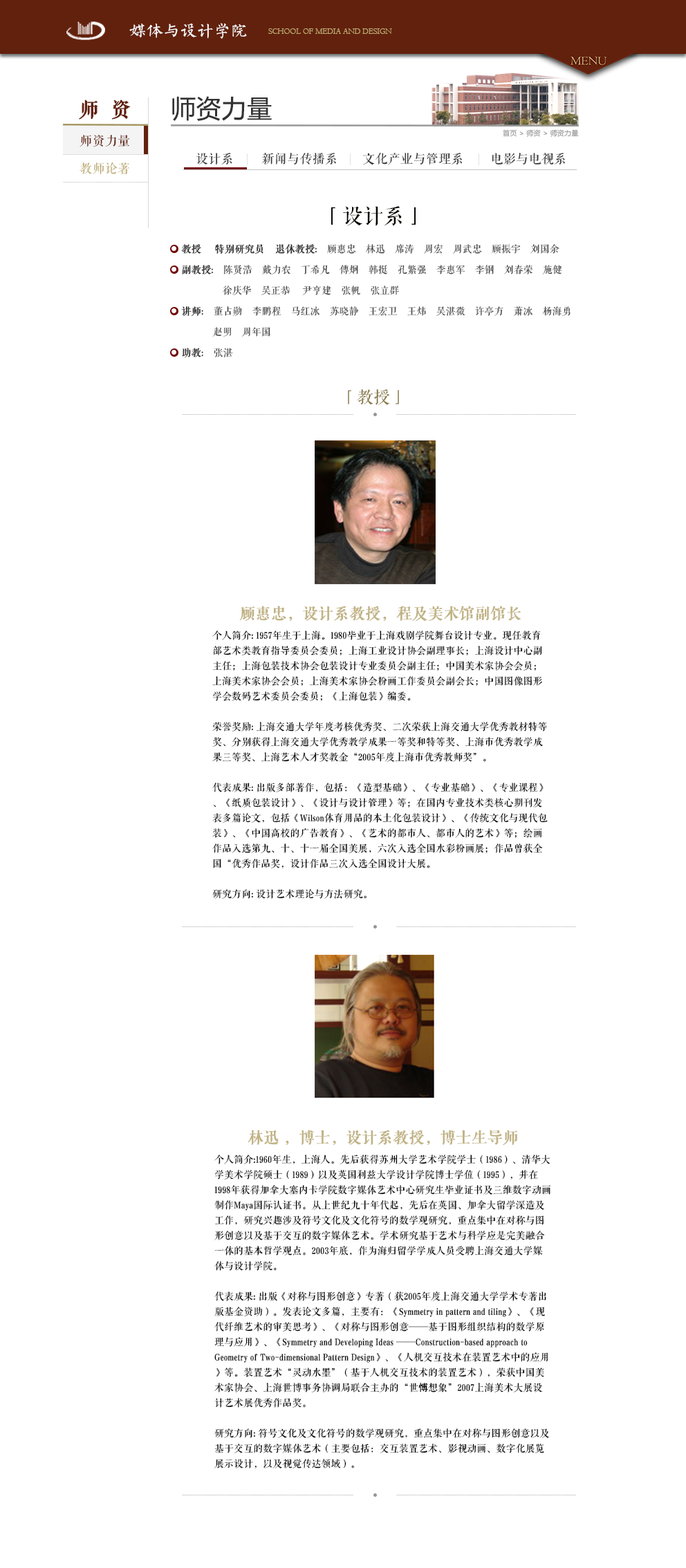
<style>
.page{position:relative;width:686px;height:1568px;background:#ffffff}
.page>*{position:absolute;margin:0}
.t1{font:16.7px "FZSXSLKJW--GB1-0";color:#ffffff}
.t2{font:8.3px "Centaur";color:#bdac73}
.t3{font:19.4px "FZQKBYSJW--GB1-0";letter-spacing:0.02em;color:#62210d;font-weight:bold}
.t4{font:24.9px "MicrosoftYaHei";letter-spacing:0.02em;color:#323232}
.t5{font:12.4px/27.7px "FZQKBYSJW--GB1-0";letter-spacing:0.02em;color:#62210d}
.t6{font:12.4px/27.7px "FZQKBYSJW--GB1-0";letter-spacing:0.02em;color:#bdac73}
.t7{font:6.9px "MicrosoftYaHei";letter-spacing:0.02em;color:#999999}
.t8{font:12.4px "FZQKBYSJW--GB1-0";letter-spacing:0.02em;color:#393838}
.t9{font:20.7px "FZQKBYSJW--GB1-0";color:#060400}
.t10{font:9.7px/20.7px "FZQKBYSJW--GB1-0";color:#494848}
.t11{font:9.7px/20.7px "FZQKBYSJW--GB1-0";color:#343333;font-weight:bold}
.t12{font:9.7px/20.7px "FZQKBYSJW--GB1-0";color:#343333}
.t13{font:9.7px/20.7px "FZQKBYSJW--GB1-0";color:#323232;font-weight:bold}
.t14{font:9.7px/20.7px "FZQKBYSJW--GB1-0";color:#323232}
.t15{font:9.7px/20.7px "FZQKBYSJW--GB1-0";color:#2c2b2b;font-weight:bold}
.t16{font:9.7px/20.7px "FZQKBYSJW--GB1-0";color:#2c2b2b}
.t17{font:9.7px/20.7px "FZQKBYSJW--GB1-0";color:#353434;font-weight:bold}
.t18{font:9.7px/20.7px "FZQKBYSJW--GB1-0";color:#353434}
.t19{font:16.6px "FZQKBYSJW--GB1-0";color:#8a7a45}
.t20{font:9.7px/15.2px "FZQKBYSJW--GB1-0";color:#060606}
.t21{font:15.2px/24.9px "FZQKBYSJW--GB1-0";color:#c1b386;font-weight:bold}
.t22{font:9.7px/15.2px "AdobeHeitiStd-Regular";color:#060606}
</style>
<div class="page">
<p class="t1" style="left:129px;top:23px;width:118px;height:16px">媒体与设计学院</p>
<p class="t2" style="left:268px;top:28px;width:124px;height:6px">SCHOOL OF MEDIA AND DESIGN</p>
<p class="t3" style="left:79px;top:100px;width:51px;height:20px">师  资</p>
<p class="t4" style="left:172px;top:96px;width:100px;height:25px">师资力量</p>
<p class="t5" style="left:80px;top:134px;width:50px;height:41px">师资力量<br><span class="t6">    教师论著</span></p>
<p class="t7" style="left:503px;top:129px;width:76px;height:8px">首页 &gt; 师资 &gt; 师资力量</p>
<p class="t8" style="left:196px;top:153px;width:36px;height:12px">设计系</p>
<p class="t8" style="left:261px;top:153px;width:75px;height:12px">新闻与传播系</p>
<p class="t8" style="left:362px;top:152px;width:100px;height:13px">文化产业与管理系</p>
<p class="t8" style="left:492px;top:153px;width:73px;height:12px">电影与电视系</p>
<p class="t9" style="left:331px;top:206px;width:85px;height:20px">「设计系」</p>
<p class="t10" style="left:181px;top:244px;width:389px;height:114px"><span class="t11">教授     特别研究员    退休教授</span><span class="t12">:</span>　顾惠忠　林迅　席涛　周宏　周武忠　顾振宇　刘国余<br><span class="t13">副教授</span><span class="t14">:　</span>陈贤浩　戴力农　丁希凡　傅炯　韩挺　孔繁强　李惠军　李钢　刘春荣　施健　<br>                 徐庆华　吴正恭     尹亨建　张帆　张立群　 <br><span class="t15">讲师</span><span class="t16">:</span>　董占勋　李鹏程　马红冰　苏晓静　王宏卫　王炜　吴湛微　许亭方　萧冰　杨海勇　<br>             赵明　周年国<br><span class="t17">助教</span><span class="t18">:　</span>张湛</p>
<p class="t19" style="left:348px;top:389px;width:51px;height:16px">「教授」</p>
<p class="t20" style="left:212px;top:606px;width:336px;height:293px;text-align:center"><span class="t21">顾惠忠，设计系教授，程及美术馆副馆长<br></span>个人简介: 1957年生于上海。1980毕业于上海戏剧学院舞台设计专业。现任教育部艺术类教育指导委员会委员；上海工业设计协会副理事长；上海设计中心副主任；上海包装技术协会包装设计专业委员会副主任；中国美术家协会会员；上海美术家协会会员；上海美术家协会粉画工作委员会副会长；中国图像图形学会数码艺术委员会委员；《上海包装》编委。<br>　<br>荣誉奖励: 上海交通大学年度考核优秀奖、二次荣获上海交通大学优秀教材特等奖、分别获得上海交通大学优秀教学成果一等奖和特等奖、上海市优秀教学成果三等奖、上海艺术人才奖教金“2005年度上海市优秀教师奖”。<br>　<br>代表成果: 出版多部著作，包括：《造型基础》、《专业基础》、《专业课程》、《纸质包装设计》、《设计与设计管理》等；在国内专业技术类核心期刊发表多篇论文，包括《Wilson体育用品的本土化包装设计》、《传统文化与现代包装》、《中国高校的广告教育》、《艺术的都市人、都市人的艺术》等；绘画作品入选第九、十、十一届全国美展，六次入选全国水彩粉画展；作品曾获全国“优秀作品奖，设计作品三次入选全国设计大展。<br>　<br>研究方向: 设计艺术理论与方法研究。</p>
<p class="t20" style="left:214px;top:1130px;width:336px;height:338px;text-align:center"><span class="t21">林迅 ，博士，设计系教授，博士生导师<br></span>个人简介:1960年生，上海人。先后获得苏州大学艺术学院学士（1986）、清华大学美术学院硕士（1989）以及英国利兹大学设计学院博士学位（1995），并在1998年获得加拿大塞内卡学院数字媒体艺术中心研究生毕业证书及三维数字动画制作Maya国际认证书。从上世纪九十年代起，先后在英国、加拿大留学深造及工作，研究兴趣涉及符号文化及文化符号的数学观研究，重点集中在对称与图形创意以及基于交互的数字媒体艺术。学术研究基于艺术与科学应是完美融合一体的基本哲学观点。2003年底，作为海归留学学成人员受聘上海交通大学媒体与设计学院。<br>　<br>代表成果: 出版《对称与图形创意》专著（获2005年度上海交通大学学术专著出版基金资助）。发表论文多篇，主要有：《Symmetry in pattern and tiling》、《现代纤维艺术的审美思考》、《对称与图形创意——基于图形组织结构的数学原理与应用》、《Symmetry and Developing Ideas ——Construction-based approach to Geometry of Two-dimensional Pattern Design》、《人机交互技术在装置艺术中的应用》等。装置艺术“灵动水墨”（基于人机交互技术的装置艺术），荣获中国美术家协会、上海世博事务协调局联合主办的“世<span class="t22">愽</span>想象”2007上海美术大展设计艺术展优秀作品奖。<br>　<br>研究方向: 符号文化及文化符号的数学观研究，重点集中在对称与图形创意以及基于交互的数字媒体艺术（主要包括：交互装置艺术、影视动画、数字化展览展示设计，以及视觉传达领域）。</p>
</div>
